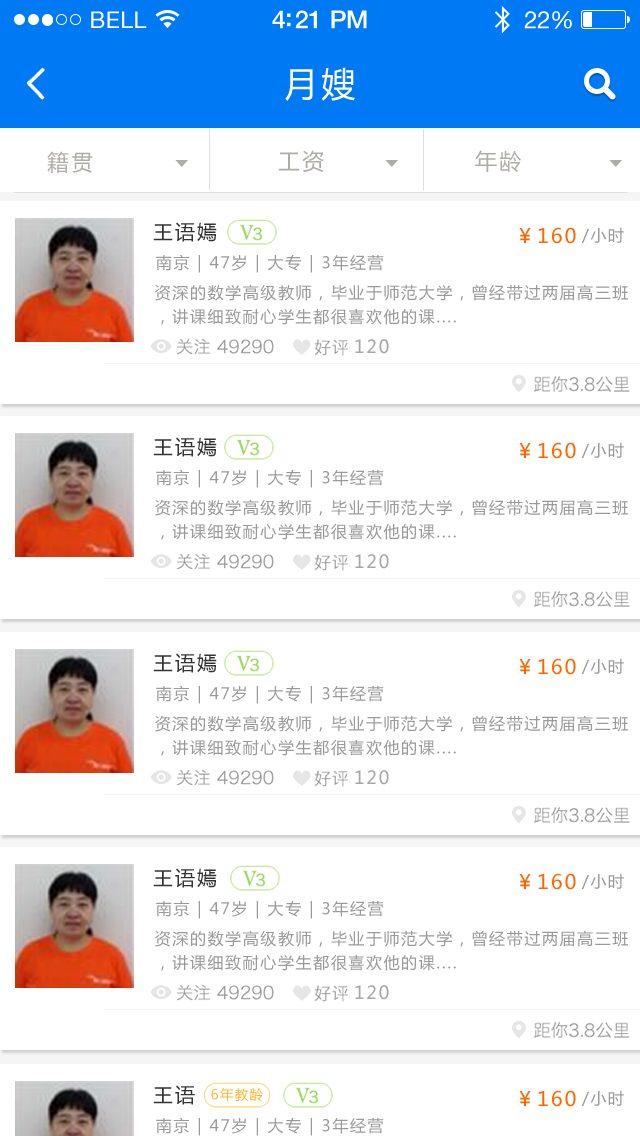
<style>
.page{position:relative;width:640px;height:1136px;background:#ffffff}
.page>*{position:absolute;margin:0}
.t1{font:23px "HelveticaNeue";letter-spacing:0.02em;color:#ffffff}
.t2{font:25px "HelveticaNeue-Medium";letter-spacing:-0.02em;color:#ffffff}
.t3{font:24px "HelveticaNeue";letter-spacing:-0.02em;color:#ffffff}
.t4{font:34px "MicrosoftYaHei";letter-spacing:0.1em;color:#ffffff}
.t5{font:22px "MicrosoftYaHei";letter-spacing:0.1em;color:#aeaca7}
.t6{font:20px "MicrosoftYaHei";letter-spacing:0.1em;color:#333333}
.t7{font:20px "MicrosoftYaHei";letter-spacing:0.1em;color:#ff6600}
.t8{font:16px "MicrosoftYaHei";letter-spacing:0.1em;color:#9a9a9a}
.t9{font:16px/24px "MicrosoftYaHei";letter-spacing:0.1em;color:#9a9a9a}
.t10{font:18px "MicrosoftYaHei";letter-spacing:0.1em;color:#a6a6a6}
</style>
<div class="page">
<p class="t1" style="left:91px;top:11px;width:56px;height:17px">BELL</p>
<p class="t2" style="left:272px;top:10px;width:95px;height:19px">4:21 PM</p>
<p class="t3" style="left:524px;top:11px;width:48px;height:18px">22%</p>
<p class="t4" style="left:285px;top:67px;width:70px;height:34px">月嫂</p>
<p class="t5" style="left:278px;top:150px;width:46px;height:22px">工资</p>
<p class="t5" style="left:475px;top:150px;width:46px;height:22px">年龄</p>
<p class="t5" style="left:47px;top:151px;width:46px;height:22px">籍贯</p>
<p class="t6" style="left:153px;top:222px;width:64px;height:20px">王语嫣</p>
<p class="t7" style="left:519px;top:227px;width:57px;height:17px">￥160</p>
<p class="t8" style="left:581px;top:227px;width:43px;height:16px">/小时</p>
<p class="t8" style="left:156px;top:254px;width:228px;height:19px">南京 | 47岁 | 大专 | 3年经营</p>
<p class="t9" style="left:155px;top:284px;width:473px;height:41px">资深的数学高级教师，毕业于师范大学，曾经带过两届高三班<br>，讲课细致耐心学生都很喜欢他的课....</p>
<p class="t10" style="left:355px;top:339px;width:34px;height:15px">120</p>
<p class="t6" style="left:153px;top:437px;width:64px;height:20px">王语嫣</p>
<p class="t7" style="left:519px;top:442px;width:57px;height:17px">￥160</p>
<p class="t8" style="left:581px;top:442px;width:43px;height:16px">/小时</p>
<p class="t8" style="left:156px;top:469px;width:228px;height:19px">南京 | 47岁 | 大专 | 3年经营</p>
<p class="t9" style="left:155px;top:499px;width:473px;height:41px">资深的数学高级教师，毕业于师范大学，曾经带过两届高三班<br>，讲课细致耐心学生都很喜欢他的课....</p>
<p class="t10" style="left:355px;top:554px;width:34px;height:15px">120</p>
<p class="t6" style="left:153px;top:653px;width:64px;height:20px">王语嫣</p>
<p class="t7" style="left:519px;top:658px;width:57px;height:17px">￥160</p>
<p class="t8" style="left:581px;top:658px;width:43px;height:16px">/小时</p>
<p class="t8" style="left:156px;top:685px;width:228px;height:19px">南京 | 47岁 | 大专 | 3年经营</p>
<p class="t9" style="left:155px;top:715px;width:473px;height:41px">资深的数学高级教师，毕业于师范大学，曾经带过两届高三班<br>，讲课细致耐心学生都很喜欢他的课....</p>
<p class="t10" style="left:355px;top:770px;width:34px;height:15px">120</p>
<p class="t6" style="left:153px;top:868px;width:64px;height:20px">王语嫣</p>
<p class="t7" style="left:519px;top:873px;width:57px;height:17px">￥160</p>
<p class="t8" style="left:581px;top:873px;width:43px;height:16px">/小时</p>
<p class="t8" style="left:156px;top:900px;width:228px;height:19px">南京 | 47岁 | 大专 | 3年经营</p>
<p class="t9" style="left:155px;top:930px;width:473px;height:41px">资深的数学高级教师，毕业于师范大学，曾经带过两届高三班<br>，讲课细致耐心学生都很喜欢他的课....</p>
<p class="t10" style="left:355px;top:985px;width:34px;height:15px">120</p>
</div>
